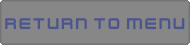
<style>
.page{position:relative;width:190px;height:45px;background:#878787}
.page>*{position:absolute;margin:0}
.t1{font:17px "KenVector-Future";color:#4c558c}
</style>
<div class="page">
<p class="t1" style="left:5px;top:18px;width:180px;height:12px">Return to menu</p>
</div>
